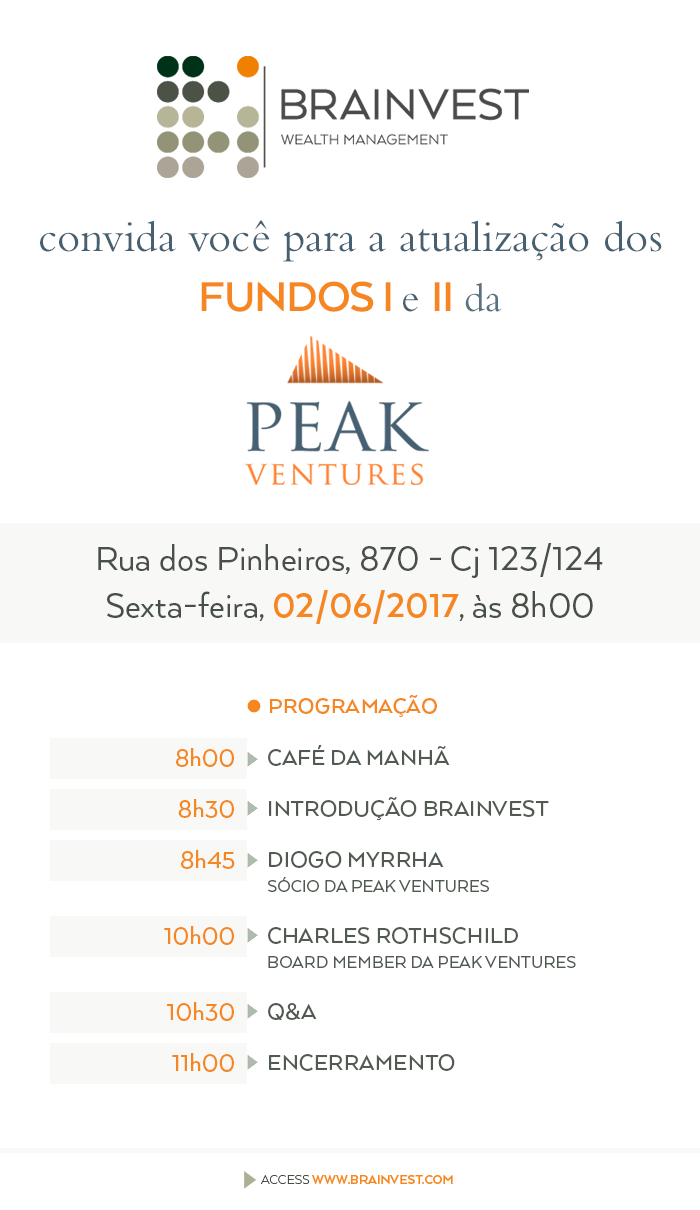
<style>
.page{position:relative;width:700px;height:1210px;background:#ffffff}
.page>*{position:absolute;margin:0}
.t1{font:45px/53px "BemboStd";color:#466071}
.t2{font:48px/60px "ArquitectaBold";letter-spacing:-0.025em;color:#f6861f;text-transform:uppercase}
.t3{font:42px/53px "BemboStd";color:#466071}
.t4{font:42px/53px "BemboStd";color:#5a7180}
.t5{font:38.2px "Arquitecta";color:#485047}
.t6{font:38.2px "Arquitecta";color:#475047}
.t7{font:38.2px "ArquitectaBold";color:#f6861f}
.t8{font:24px "ArquitectaBold";color:#f6861f;text-transform:uppercase}
.t9{font:27px/51px "ArquitectaMedium";color:#f6861f}
.t10{font:25px/51px "ArquitectaMedium";color:#515a51;text-transform:uppercase}
.t11{font:19px/25px "Arquitecta";color:#515a51;text-transform:uppercase}
</style>
<div class="page">
<p class="t1" style="left:40px;top:220px;width:622px;height:92px;text-align:center">convida você para a atualização dos <br><span class="t2">FundoS I </span><span class="t3">e </span><span class="t2">II </span><span class="t4">da</span></p>
<p class="t5" style="left:98px;top:543px;width:505px;height:35px">Rua dos Pinheiros, 870 - Cj 123/124</p>
<p class="t6" style="left:107px;top:590px;width:486px;height:34px">Sexta-feira, <span class="t7">02/06/2017</span>, às 8h00</p>
<p class="t8" style="left:270px;top:695px;width:167px;height:22px">Programação</p>
<p class="t9" style="left:164px;top:748px;width:71px;height:324px;text-align:right">8h00<br>8h30<br>8h45<br><br>10h00<br><br>10h30<br>11h00</p>
<p class="t10" style="left:268px;top:745px;width:308px;height:326px">Café da Manhã<br>Introdução Brainvest<br>Diogo Myrrha<br><span class="t11">Sócio da Peak Ventures<br></span>Charles Rothschild<br><span class="t11">Board Member da Peak Ventures<br></span>Q&amp;A<br>Encerramento</p>
</div>
